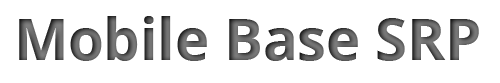
<style>
.page{position:relative;width:500px;height:83px;background:#ffffff}
.page>*{position:absolute;margin:0}
.t1{font:57.5px "OpenSans-Bold"}
</style>
<div class="page">
<p class="t1" style="left:19px;top:16px;width:460px;height:45px">Mobile Base SRP</p>
</div>
